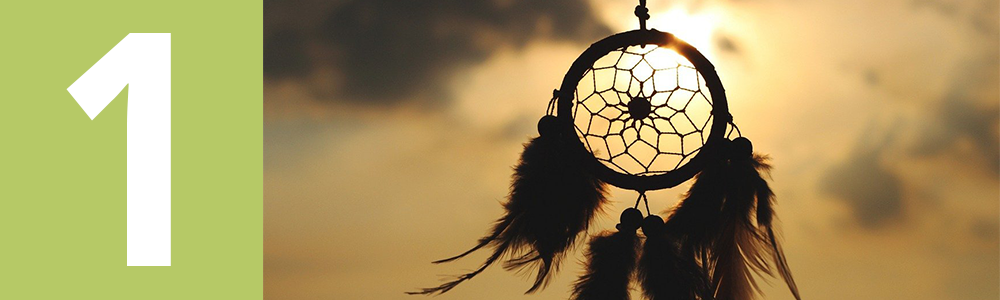
<style>
.page{position:relative;width:1000px;height:300px;background:#b6c966}
.page>*{position:absolute;margin:0}
.t1{font:416.7px "Novecentosanswide-Medium";color:#ffffff}
</style>
<div class="page">
<p class="t1" style="left:66px;top:33px;width:105px;height:233px">1</p>
</div>
